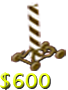
<style>
.page{position:relative;width:68px;height:90px;background:#ffffff}
.page>*{position:absolute;margin:0}
.t1{font:21.5px "LucidaConsole"}
</style>
<div class="page">
<p class="t1" style="left:0px;top:72px;width:50px;height:17px">$600</p>
</div>
